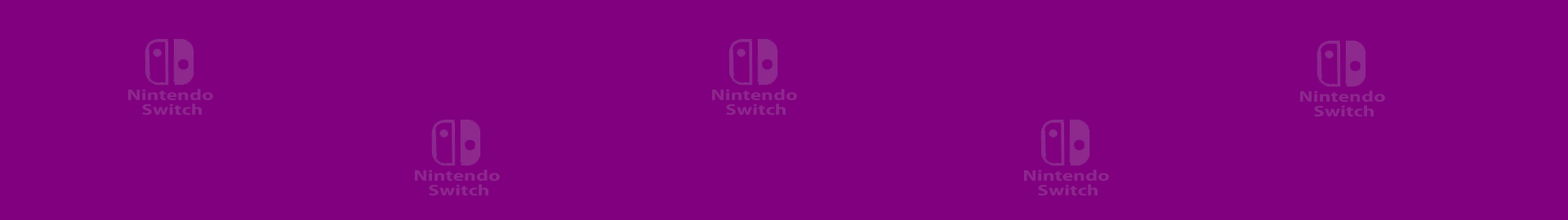
<style>
.page{position:relative;width:1568px;height:220px;background:#800080}
.page>*{position:absolute;margin:0}
.t1{font:15.5px/14.7px "MyriadPro-Bold";color:#8d278d;scale:1.34 1}
</style>
<div class="page">
<p class="t1" style="left:128px;top:89px;width:85px;height:26px;text-align:center">Nintendo <br>Switch</p>
<p class="t1" style="left:712px;top:89px;width:85px;height:26px;text-align:center">Nintendo <br>Switch</p>
<p class="t1" style="left:1300px;top:91px;width:85px;height:26px;text-align:center">Nintendo <br>Switch</p>
<p class="t1" style="left:415px;top:170px;width:85px;height:26px;text-align:center">Nintendo <br>Switch</p>
<p class="t1" style="left:1024px;top:170px;width:85px;height:26px;text-align:center">Nintendo <br>Switch</p>
</div>
